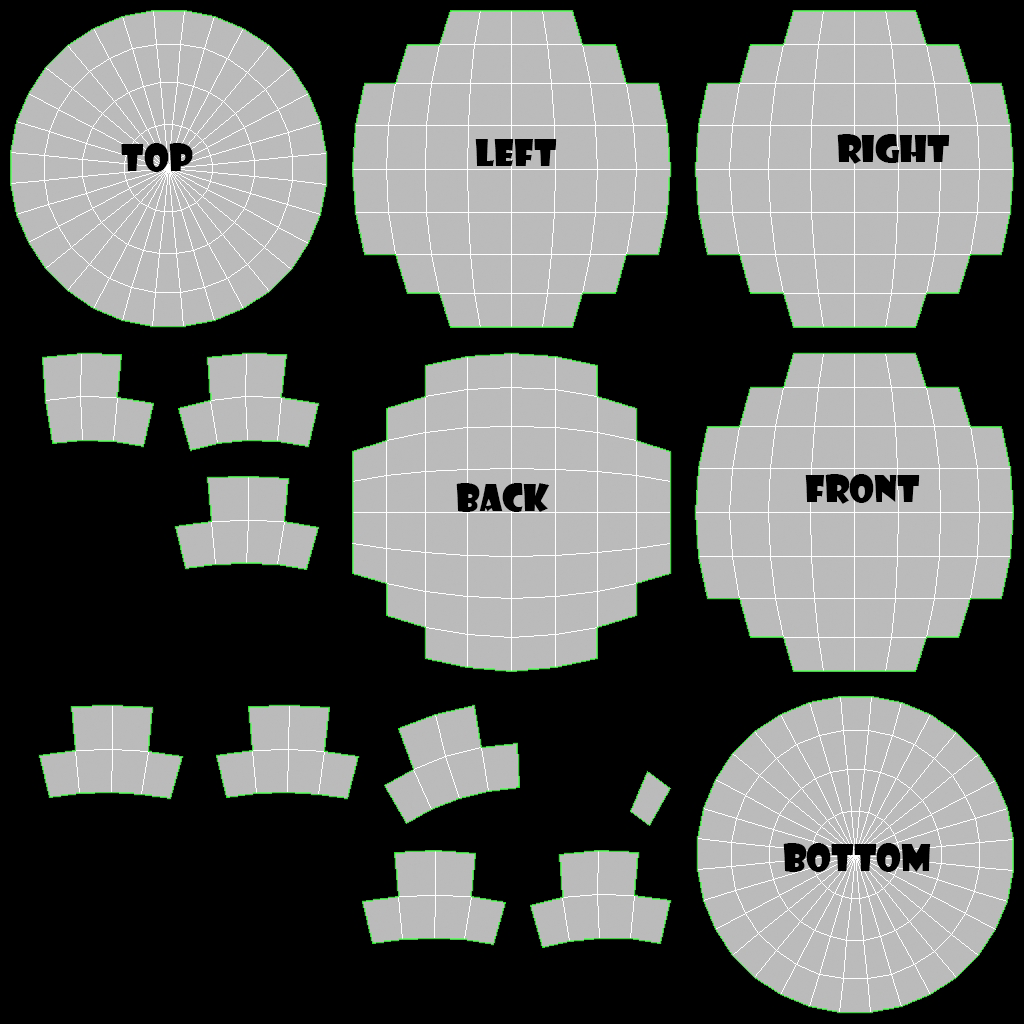
<style>
.page{position:relative;width:1024px;height:1024px;background:#000000}
.page>*{position:absolute;margin:0}
.t1{font:36px "ShowcardGothic-Reg";color:#000000}
</style>
<div class="page">
<p class="t1" style="left:837px;top:134px;width:113px;height:30px">right</p>
<p class="t1" style="left:121px;top:143px;width:72px;height:29px">top</p>
<p class="t1" style="left:475px;top:139px;width:82px;height:27px">left</p>
<p class="t1" style="left:456px;top:483px;width:94px;height:29px">back</p>
<p class="t1" style="left:805px;top:474px;width:115px;height:30px">Front</p>
<p class="t1" style="left:783px;top:843px;width:148px;height:29px">bottom</p>
</div>
